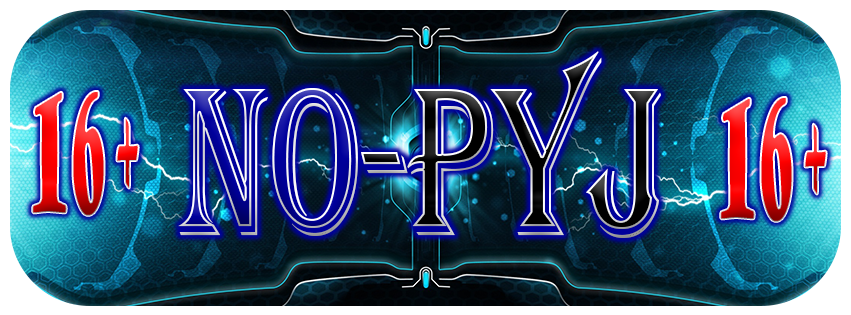
<style>
.page{position:relative;width:851px;height:315px}
.page>*{position:absolute;margin:0}
.t1{font:219.2px "Algerian";scale:0.67 1}
.t2{font:158.5px "GoudyStout";scale:0.3 1}
</style>
<div class="page">
<p class="t1" style="left:178px;top:51px;width:484px;height:187px">No-Pyj</p>
<p class="t2" style="left:32px;top:91px;width:107px;height:125px">16+</p>
<p class="t2" style="left:720px;top:97px;width:107px;height:125px">16+</p>
</div>
